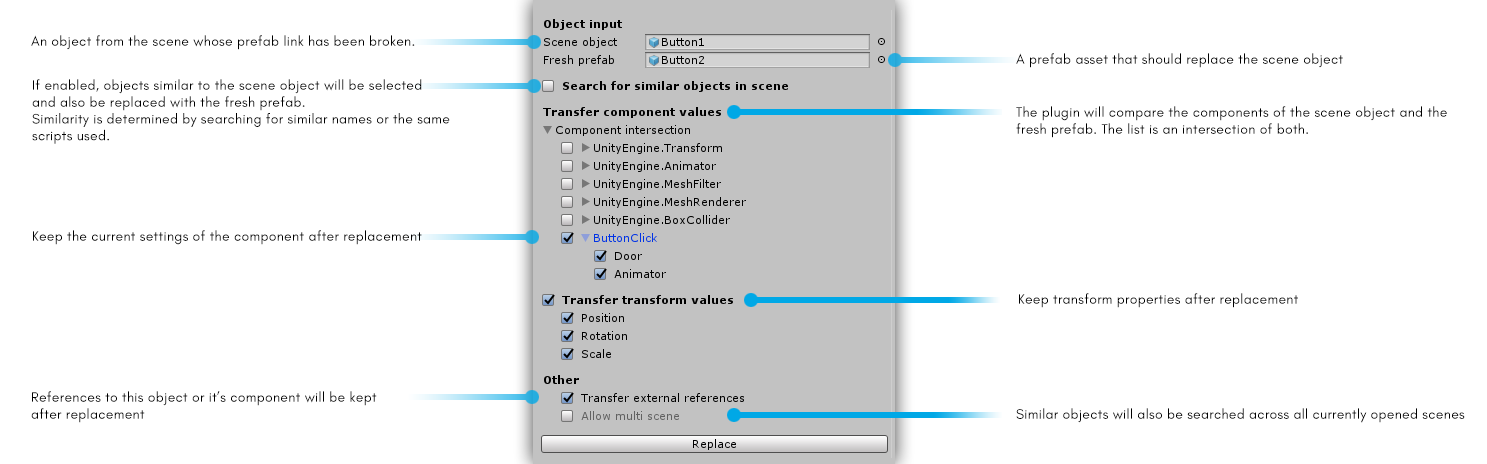
<style>
.page{position:relative;width:1487px;height:464px;background:#ffffff}
.page>*{position:absolute;margin:0}
.t1{font:14px "GlacialIndifference-Regular";letter-spacing:0.02em;color:#000000}
</style>
<div class="page">
<p class="t1" style="left:31px;top:35px;width:384px;height:15px">An object from the scene whose prefab link has been broken.</p>
<p class="t1" style="left:1016px;top:53px;width:327px;height:15px">A prefab asset that should replace the scene object</p>
<p class="t1" style="left:32px;top:79px;width:418px;height:65px">If enabled, objects similar to the scene object will be selected<br>and also be replaced with the fresh prefab.<br>Similarity is determined by searching for similar names or the same<br>scripts used.</p>
<p class="t1" style="left:1016px;top:106px;width:431px;height:32px">The plugin will compare the components of the scene object and the<br>fresh prefab. The list is an intersection of both.</p>
<p class="t1" style="left:33px;top:230px;width:389px;height:15px">Keep the current settings of the component after replacement</p>
<p class="t1" style="left:1019px;top:293px;width:279px;height:15px">Keep transform properties after replacement</p>
<p class="t1" style="left:31px;top:391px;width:346px;height:32px">References to this object or it’s component will be kept<br>after replacement</p>
<p class="t1" style="left:1016px;top:408px;width:449px;height:15px">Similar objects will also be searched across all currently opened scenes</p>
</div>
